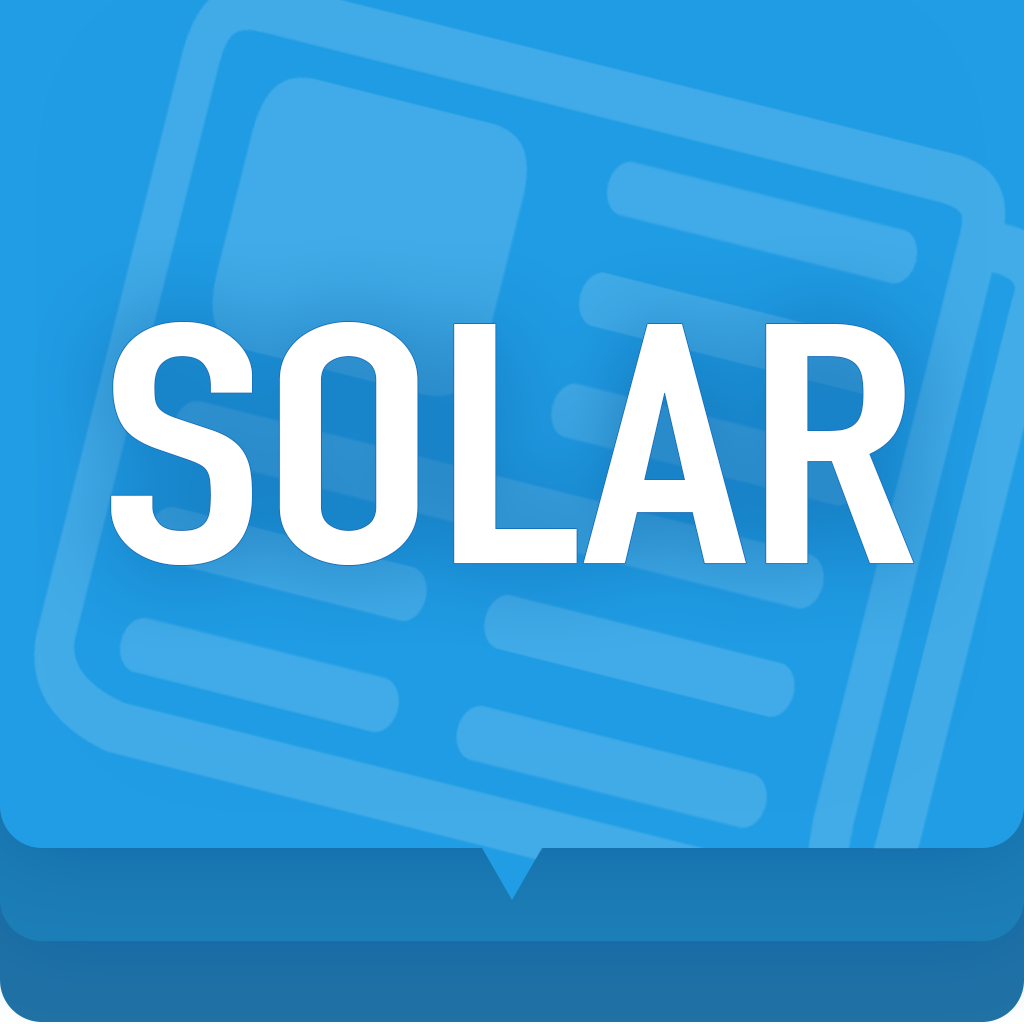
<style>
.page{position:relative;width:1024px;height:1024px}
.page>*{position:absolute;margin:0}
.t1{font:335px "DINCondensed-Bold";color:#ffffff;scale:1.2 1}
</style>
<div class="page">
<p class="t1" style="left:111px;top:322px;width:803px;height:243px">SOLAR</p>
</div>
